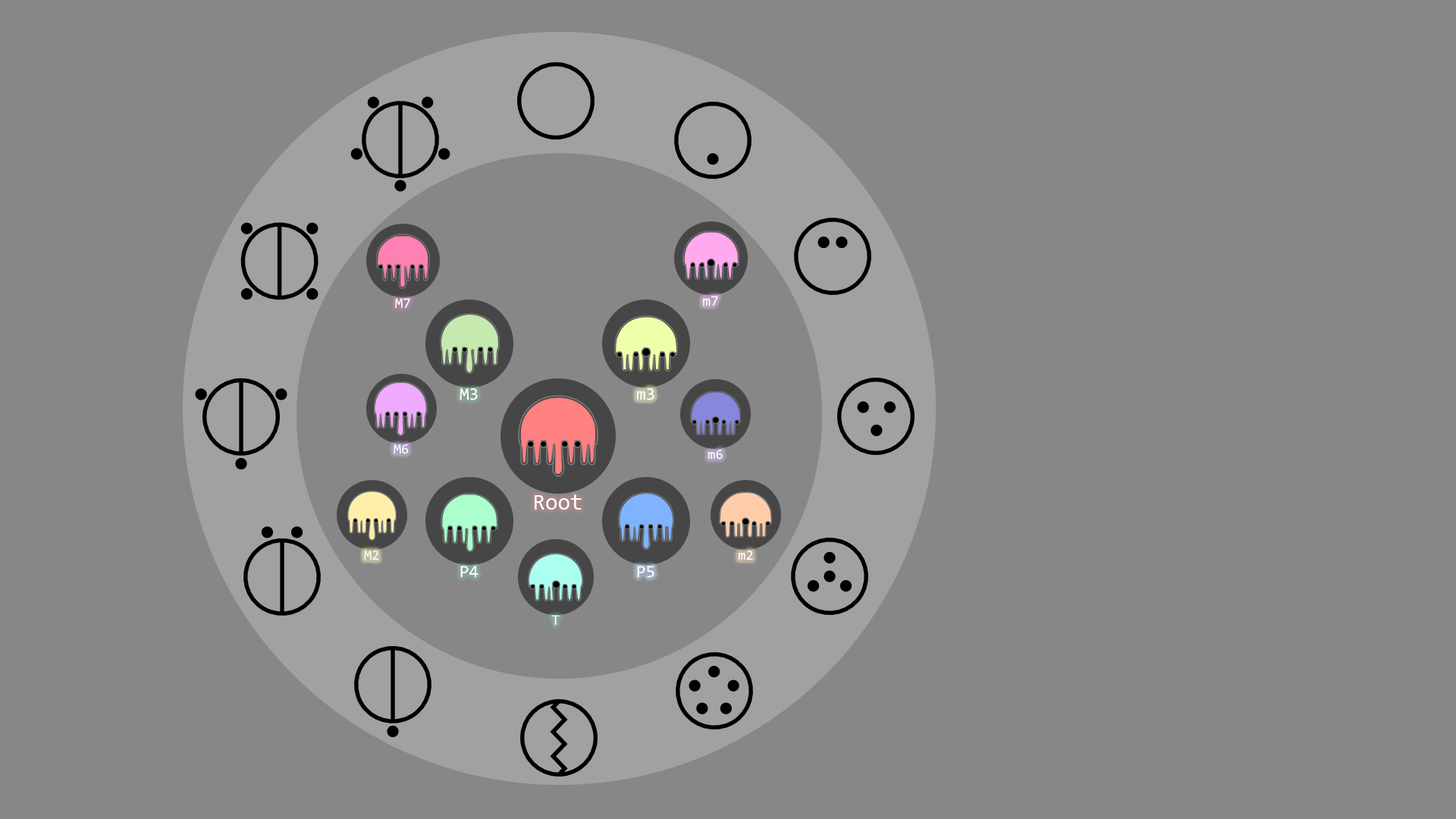
<style>
.page{position:relative;width:1456px;height:819px;background:#878787}
.page>*{position:absolute;margin:0}
.t1{font:14.6px "Consolas";color:#ffffff}
.t2{font:17.3px "Consolas";color:#ffffff}
.t3{font:13.8px "Consolas";color:#ffffff}
.t4{font:22.7px "Consolas";color:#ffffff}
.t5{font:14.9px "Consolas";color:#ffffff}
</style>
<div class="page">
<p class="t1" style="left:395px;top:298px;width:15px;height:11px">M7</p>
<p class="t1" style="left:703px;top:296px;width:15px;height:10px">m7</p>
<p class="t2" style="left:460px;top:388px;width:18px;height:12px">M3</p>
<p class="t2" style="left:636px;top:388px;width:18px;height:12px">m3</p>
<p class="t3" style="left:394px;top:444px;width:15px;height:10px">M6</p>
<p class="t3" style="left:708px;top:450px;width:15px;height:10px">m6</p>
<p class="t4" style="left:535px;top:494px;width:47px;height:16px">Root</p>
<p class="t3" style="left:364px;top:551px;width:15px;height:9px">M2</p>
<p class="t3" style="left:738px;top:551px;width:15px;height:9px">m2</p>
<p class="t2" style="left:460px;top:566px;width:19px;height:12px">P4</p>
<p class="t2" style="left:637px;top:566px;width:17px;height:12px">P5</p>
<p class="t5" style="left:552px;top:615px;width:8px;height:11px">T</p>
</div>
